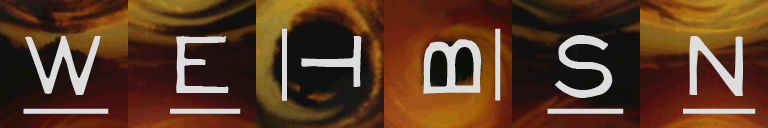
<style>
.page{position:relative;width:768px;height:128px}
.page>*{position:absolute;margin:0}
.t1{font:100px "NeoRetroFill";color:#dddddd;text-decoration:underline}
</style>
<div class="page">
<p class="t1" style="left:282px;top:28px;width:80px;height:73px;rotate:90deg">T</p>
<p class="t1" style="left:423px;top:28px;width:78px;height:73px;rotate:-90deg">B</p>
<p class="t1" style="left:23px;top:36px;width:86px;height:78px">W</p>
<p class="t1" style="left:170px;top:36px;width:71px;height:78px">E</p>
<p class="t1" style="left:547px;top:35px;width:77px;height:79px">S</p>
<p class="t1" style="left:683px;top:36px;width:73px;height:78px">N</p>
</div>
